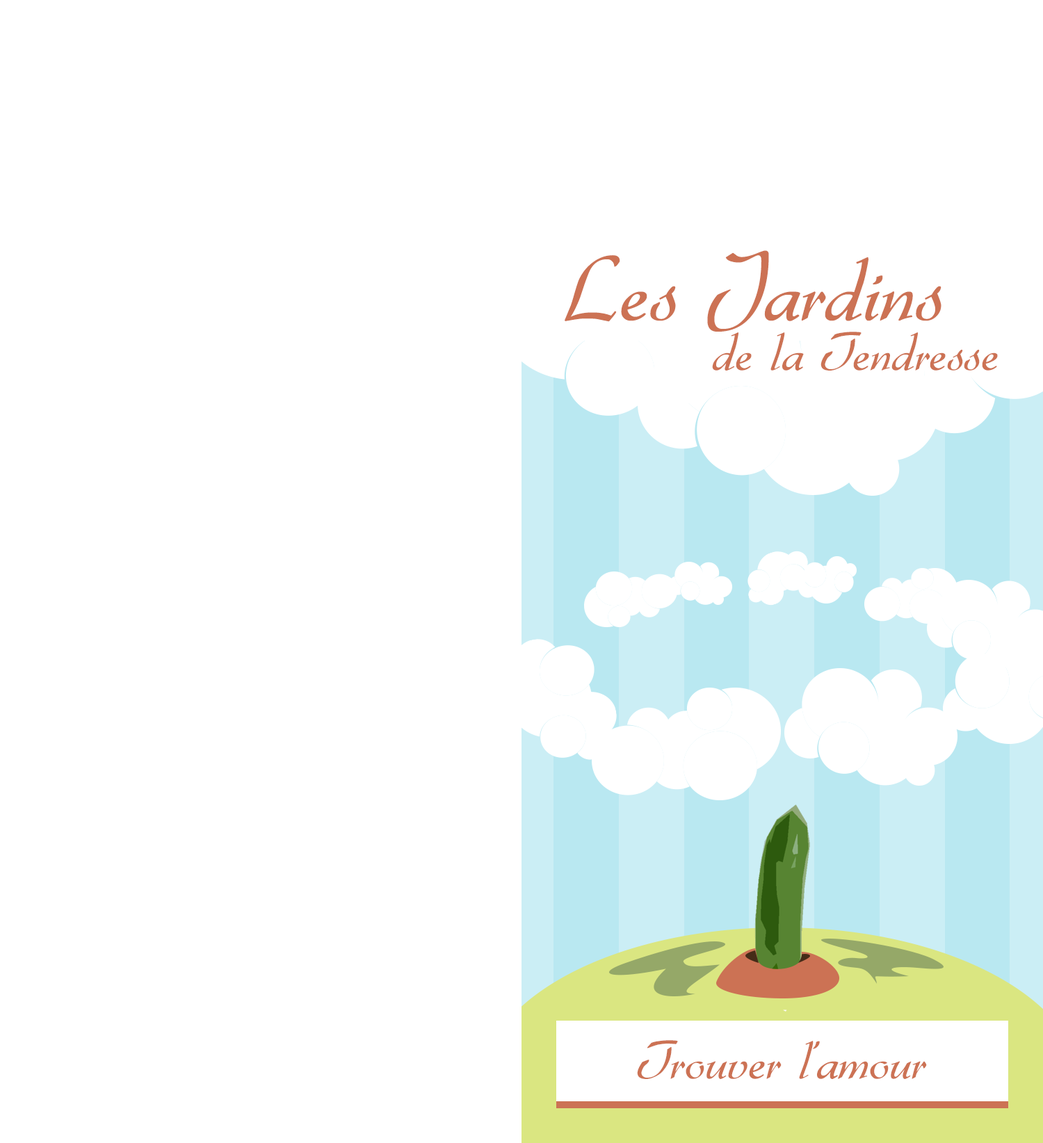
<style>
.page{position:relative;width:1043px;height:1143px;background:#ffffff}
.page>*{position:absolute;margin:0}
.t1{font:94.5px "Gabrielle";color:#cc7254}
.t2{font:56.7px "Gabrielle";color:#cc7254}
</style>
<div class="page">
<p class="t1" style="left:565px;top:250px;width:377px;height:82px">Les Jardins</p>
<p class="t2" style="left:712px;top:332px;width:286px;height:39px">de la Tendresse</p>
<p class="t2" style="left:637px;top:1040px;width:290px;height:39px">Trouver l’amour</p>
</div>
